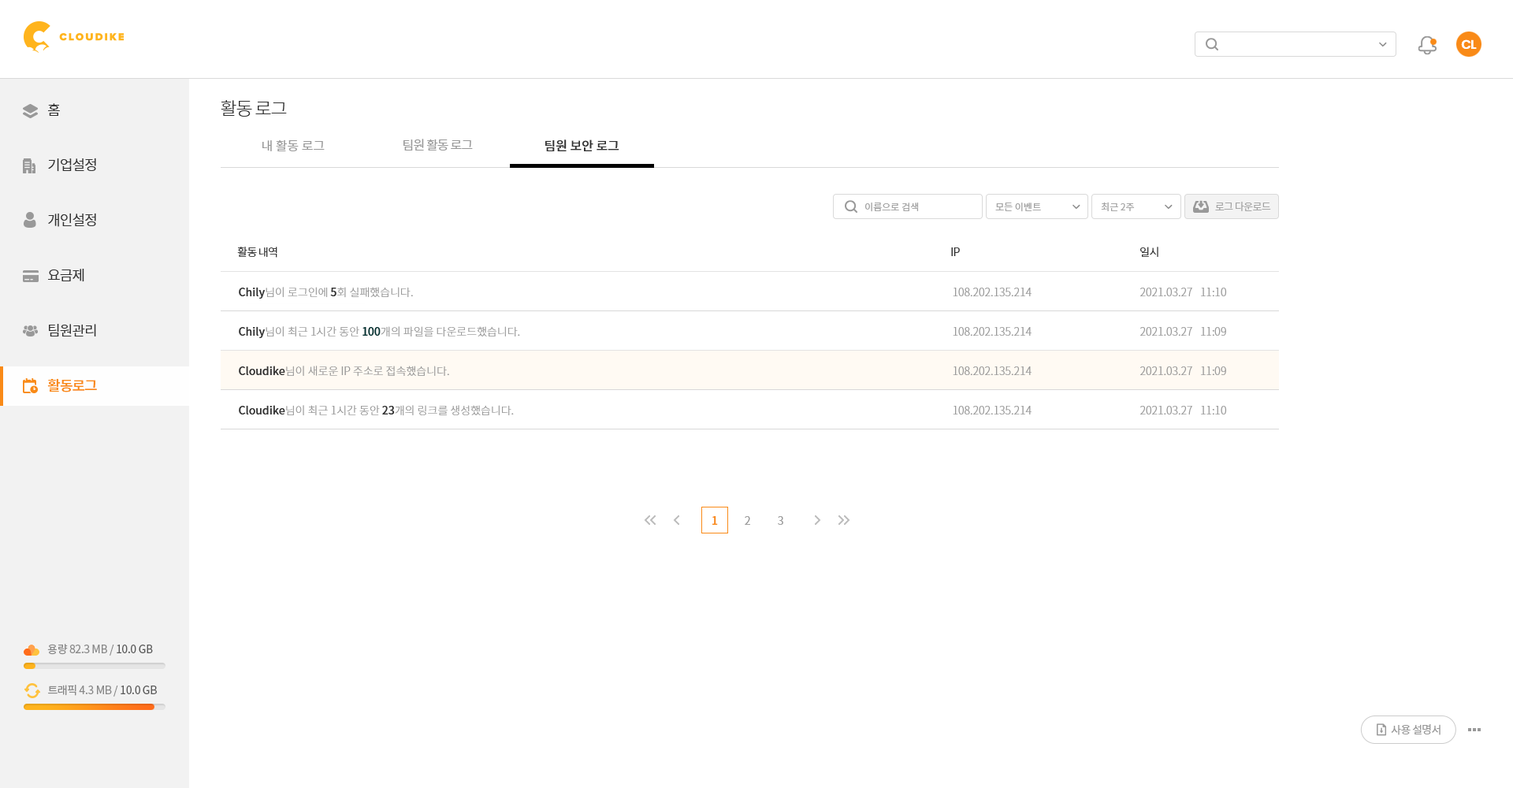
<style>
.page{position:relative;width:1513px;height:788px;background:#ffffff}
.page>*{position:absolute;margin:0}
.t1{font:12.6px "Poppins-SemiBold";letter-spacing:-0.05em;color:#ffffff}
.t2{font:18.1px "NotoSansCJKkr-Light";letter-spacing:-0.05em;color:#333333}
.t3{font:14.2px/55.2px "NotoSansCJKkr-DemiLight";letter-spacing:-0.05em;color:#333333}
.t4{font:14.2px/55.2px "NotoSansCJKkr-Medium";letter-spacing:-0.05em;color:#f98a17}
.t5{font:12.6px "NotoSansCJKkr-DemiLight";color:#999999}
.t6{font:12.6px "NotoSansCJKkr-DemiLight";letter-spacing:-0.05em;color:#999999}
.t7{font:12.6px "NotoSansCJKkr-Medium";color:#333333}
.t8{font:9.5px "NotoSansCJKkr-DemiLight";color:#a1a1a1}
.t9{font:10.2px "NotoSansCJKkr-DemiLight";letter-spacing:-0.05em;color:#a1a1a1}
.t10{font:11px "NotoSansCJKkr-DemiLight";letter-spacing:-0.05em;color:#333333}
.t11{font:11px/39.4px "NotoSansCJKkr-Light";color:#999999}
.t12{font:11px/39.4px "NotoSansCJKkr-Medium";color:#333333}
.t13{font:11px/39.4px "NotoSansCJKkr-Medium";color:#003333}
.t14{font:11px "NotoSansCJKkr-Medium";color:#f98a17}
.t15{font:11px "NotoSansCJKkr-DemiLight";color:#999999}
.t16{font:11px "NotoSansCJKkr-Regular";letter-spacing:-0.025em;color:#888888}
.t17{font:11px "NotoSansCJKkr-Regular";letter-spacing:-0.025em;color:#585858}
.t18{font:11px "NotoSansCJKkr-Regular";letter-spacing:-0.05em;color:#999999}
</style>
<div class="page">
<p class="t1" style="left:1461px;top:39px;width:16px;height:10px">CL</p>
<p class="t2" style="left:221px;top:100px;width:66px;height:17px">활동 로그</p>
<p class="t3" style="left:47px;top:103px;width:50px;height:289px">홈<br>기업설정<br>개인설정<br>요금제<br>팀원관리<br><span class="t4">활동로그</span></p>
<p class="t5" style="left:262px;top:139px;width:63px;height:12px">내 활동 로그</p>
<p class="t6" style="left:403px;top:139px;width:70px;height:12px">팀원 활동 로그</p>
<p class="t7" style="left:545px;top:139px;width:74px;height:12px">팀원 보안 로그</p>
<p class="t8" style="left:865px;top:203px;width:54px;height:9px">이름으로 검색</p>
<p class="t8" style="left:995px;top:203px;width:46px;height:9px">모든 이벤트</p>
<p class="t8" style="left:1101px;top:202px;width:34px;height:9px">최근 2주</p>
<p class="t9" style="left:1215px;top:202px;width:56px;height:9px">로그 다운로드</p>
<p class="t10" style="left:237px;top:247px;width:40px;height:11px">활동 내역</p>
<p class="t10" style="left:951px;top:247px;width:9px;height:9px">IP</p>
<p class="t10" style="left:1140px;top:247px;width:18px;height:10px">일시</p>
<p class="t11" style="left:239px;top:287px;width:281px;height:129px"><span class="t12">Chily</span>님이 로그인에<span class="t12"> 5</span>회 실패했습니다.<br><span class="t12">Chily</span>님이 최근 1시간 동안 <span class="t13">100</span>개의 파일을 다운로드했습니다.<br><span class="t12">Cloudike</span>님이 새로운 IP 주소로 접속했습니다.<br><span class="t12">Cloudike</span>님이 최근 1시간 동안 <span class="t12">23</span>개의 링크를 생성했습니다.</p>
<p class="t11" style="left:953px;top:288px;width:79px;height:127px">108.202.135.214<br>108.202.135.214<br>108.202.135.214<br>108.202.135.214</p>
<p class="t11" style="left:1140px;top:288px;width:87px;height:127px">2021.03.27   11:10<br>2021.03.27   11:09<br>2021.03.27   11:09<br>2021.03.27   11:10</p>
<p class="t14" style="left:712px;top:516px;width:6px;height:9px">1</p>
<p class="t15" style="left:745px;top:516px;width:5px;height:9px">2</p>
<p class="t15" style="left:778px;top:516px;width:5px;height:9px">3</p>
<p class="t16" style="left:47px;top:644px;width:106px;height:12px">용량 82.3 MB / <span class="t17">10.0 GB</span></p>
<p class="t16" style="left:48px;top:685px;width:109px;height:12px">트래픽 4.3 MB / <span class="t17">10.0 GB</span></p>
<p class="t18" style="left:1391px;top:724px;width:50px;height:11px">사용 설명서</p>
</div>
